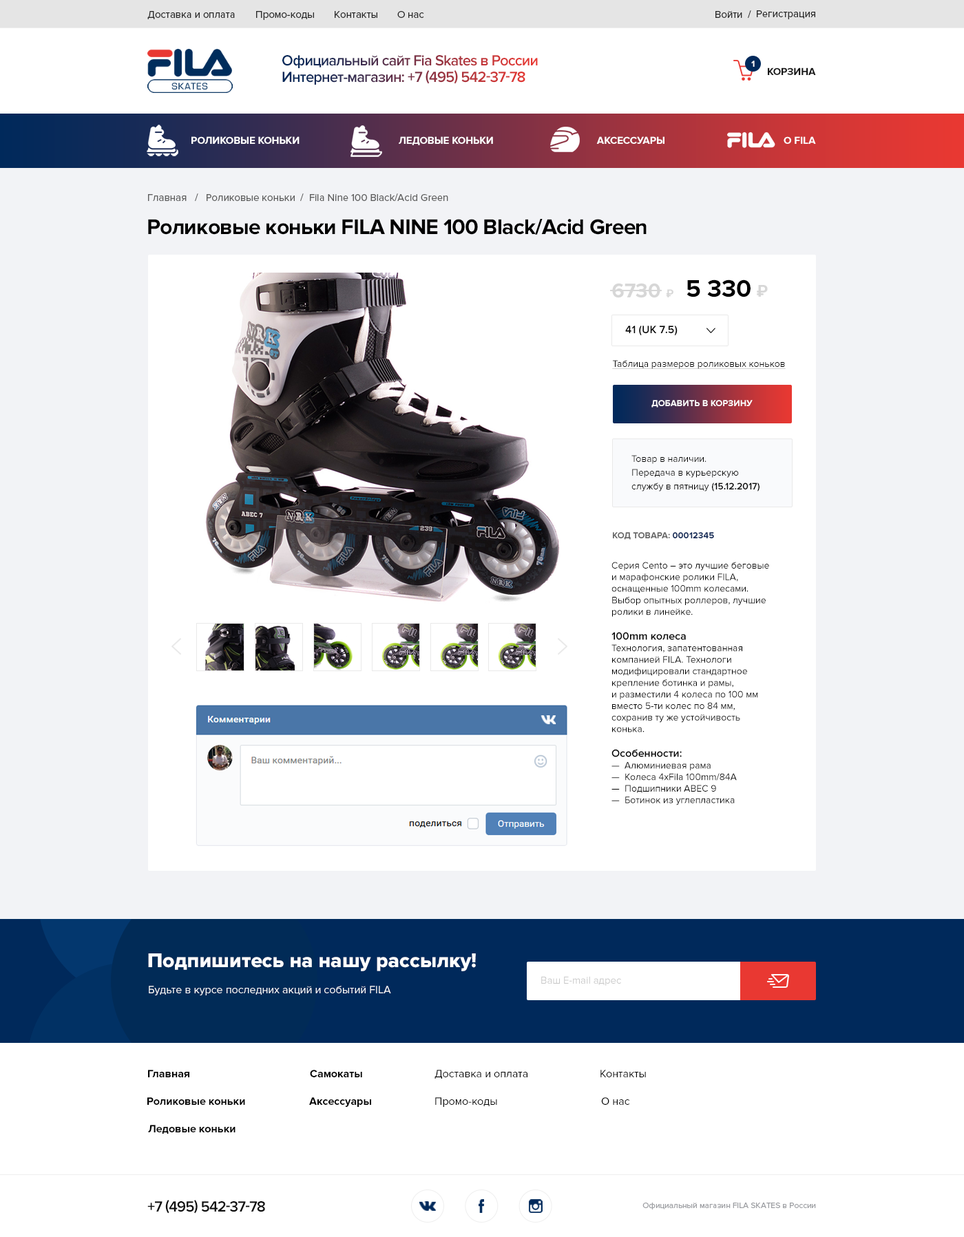
<style>
.page{position:relative;width:964px;height:1237px;background:#ffffff}
.page>*{position:absolute;margin:0}
.t1{font:10.3px "ProximaNova-Regular";color:#282828}
.t2{font:15.1px/16.5px "ProximaNova-Semibold";letter-spacing:-0.04em}
.t3{font:15.1px/16.5px "ProximaNova-Semibold";letter-spacing:-0.04em;text-transform:uppercase}
.t4{font:8.9px "ProximaNova-Bold";color:#ffffff;text-transform:uppercase}
.t5{font:10.3px "ProximaNova-Bold";color:#181818;text-transform:uppercase}
.t6{font:10.3px "ProximaNova-Bold";color:#ffffff;text-transform:uppercase}
.t7{font:10.3px "ProximaNova-Regular";color:#5d5d5d}
.t8{font:22px "ProximaNova-Bold";letter-spacing:-0.025em;color:#000000}
.t9{font:24.8px "ProximaNova-Bold";color:#000000}
.t10{font:20.7px "ProximaNova-Bold";color:#d7d7d7}
.t11{font:20.7px "ProximaNova-Bold";color:#000000}
.t12{font:11px "Roboto-Bold";color:#d7d7d7}
.t13{font:16.5px "Roboto-Bold";color:#d7d7d7}
.t14{font:11px "ProximaNova-Semibold";color:#000000}
.t15{font:9.6px "ProximaNova-Regular";color:#000000;text-decoration:underline}
.t16{font:9.6px/13.8px "ProximaNova-Regular";color:#000000}
.t17{font:9.6px/13.8px "ProximaNova-Semibold";color:#000000}
.t18{font:8.9px "ProximaNova-Bold";color:#666666;text-transform:uppercase}
.t19{font:8.9px "ProximaNova-Bold";color:#112a58;text-transform:uppercase}
.t20{font:9.6px "ProximaNova-Regular";color:#000000}
.t21{font:20.7px "ProximaNova-Extrabld";color:#ffffff}
.t22{font:10.3px "ProximaNova-Regular";color:#c6c6c6}
.t23{font:11px "ProximaNova-Regular";color:#ffffff}
.t24{font:11px "ProximaNova-Bold";color:#000000}
.t25{font:11px "ProximaNova-Regular";color:#000000}
.t26{font:15.1px "ProximaNova-Semibold";letter-spacing:-0.04em;color:#0d0d0d;text-transform:uppercase}
.t27{font:8.3px "ProximaNova-Regular";color:#9d9fa3}
</style>
<div class="page">
<p class="t1" style="left:147px;top:11px;width:88px;height:8px">Доставка и оплата</p>
<p class="t1" style="left:256px;top:11px;width:58px;height:9px">Промо-коды</p>
<p class="t1" style="left:335px;top:11px;width:42px;height:7px">Контакты</p>
<p class="t1" style="left:397px;top:11px;width:27px;height:7px">О нас</p>
<p class="t1" style="left:715px;top:10px;width:36px;height:8px">Войти  /</p>
<p class="t1" style="left:757px;top:10px;width:58px;height:9px">Регистрация</p>
<p class="t2" style="left:282px;top:55px;width:256px;height:30px">Официальный сайт Fia Skates в России<br>Интернет-магазин: <span class="t3">+7 (495) 542-37-78</span></p>
<p class="t4" style="left:751px;top:61px;width:4px;height:6px">1</p>
<p class="t5" style="left:768px;top:67px;width:48px;height:8px">Корзина</p>
<p class="t6" style="left:191px;top:136px;width:108px;height:8px">роликовые коньки</p>
<p class="t6" style="left:399px;top:136px;width:94px;height:9px">Ледовые коньки</p>
<p class="t6" style="left:596px;top:136px;width:68px;height:8px">Аксессуары</p>
<p class="t6" style="left:783px;top:136px;width:33px;height:8px">о fila</p>
<p class="t7" style="left:148px;top:193px;width:300px;height:8px">Главная   /   Роликовые коньки  /  Fila Nine 100 Black/Acid Green</p>
<p class="t8" style="left:148px;top:219px;width:498px;height:16px">Роликовые коньки FILA NINE 100 Black/Acid Green</p>
<p class="t9" style="left:686px;top:280px;width:64px;height:17px">5 330</p>
<p class="t10" style="left:612px;top:283px;width:48px;height:15px"><span class="t11"><br></span>6730</p>
<p class="t12" style="left:666px;top:289px;width:7px;height:8px">₽</p>
<p class="t13" style="left:757px;top:285px;width:11px;height:12px">₽</p>
<p class="t14" style="left:625px;top:326px;width:52px;height:10px">41 (UK 7.5)</p>
<p class="t15" style="left:612px;top:360px;width:174px;height:9px">Таблица размеров роликовых коньков</p>
<p class="t4" style="left:651px;top:400px;width:101px;height:8px">Добавить в корзину</p>
<p class="t16" style="left:631px;top:455px;width:128px;height:37px">Товар в наличии. <br>Передача в курьерскую <br>службу в пятницу <span class="t17">(15.12.2017)</span></p>
<p class="t18" style="left:613px;top:532px;width:101px;height:8px">код товара: <span class="t19">00012345</span></p>
<p class="t20" style="left:611px;top:562px;width:158px;height:243px">Серия Cento – это лучшие беговые и марафонские ролики FILA, оснащенные 100mm колесами. Выбор опытных роллеров, лучшие ролики в линейке.<br><br><span class="t14">100mm колеса<br></span>Технология, запатентованная компанией FILA. Технологи<br>модифицировали стандартное крепление ботинка и рамы, <br>и разместили 4 колеса по 100 мм вместо 5-ти колес по 84 мм, <br>сохранив ту же устойчивость конька.<br><br><span class="t14">Особенности:<br></span>—  Алюминиевая рама<br>—  Колеса 4xFila 100mm/84A<br>—  Подшипники ABEC 9<br>—  Ботинок из углепластика</p>
<p class="t21" style="left:148px;top:954px;width:328px;height:17px">Подпишитесь на нашу рассылку!</p>
<p class="t22" style="left:541px;top:976px;width:80px;height:10px">Ваш E-mail адрес</p>
<p class="t23" style="left:149px;top:986px;width:242px;height:10px">Будьте в курсе последних акций и событий FILA</p>
<p class="t24" style="left:148px;top:1070px;width:41px;height:7px">Главная</p>
<p class="t24" style="left:310px;top:1070px;width:52px;height:7px">Самокаты</p>
<p class="t25" style="left:434px;top:1070px;width:93px;height:9px">Доставка и оплата</p>
<p class="t25" style="left:600px;top:1070px;width:46px;height:7px">Контакты</p>
<p class="t24" style="left:147px;top:1097px;width:98px;height:8px">Роликовые коньки</p>
<p class="t24" style="left:309px;top:1097px;width:62px;height:10px">Аксессуары</p>
<p class="t25" style="left:435px;top:1097px;width:62px;height:10px">Промо-коды</p>
<p class="t25" style="left:601px;top:1097px;width:29px;height:8px">О нас</p>
<p class="t24" style="left:148px;top:1125px;width:87px;height:9px">Ледовые коньки</p>
<p class="t26" style="left:147px;top:1200px;width:118px;height:14px">+7 (495) 542-37-78</p>
<p class="t27" style="left:642px;top:1203px;width:174px;height:7px">Официальный магазин FILA SKATES в России</p>
</div>
